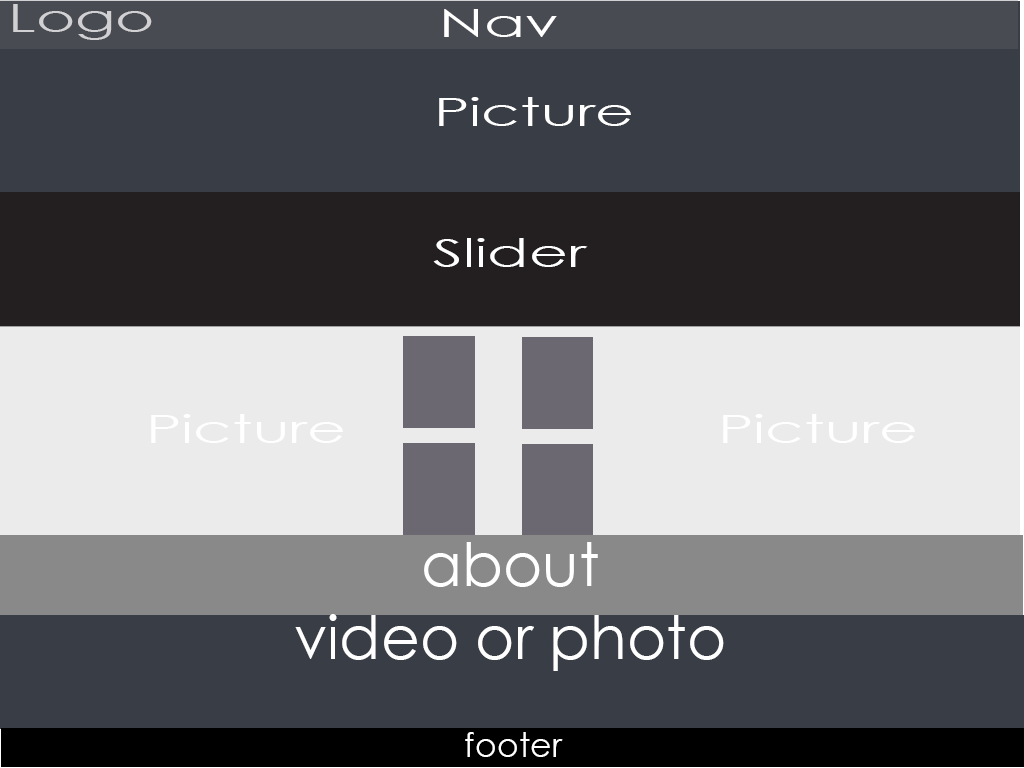
<style>
.page{position:relative;width:1024px;height:768px;background:#393e46}
.page>*{position:absolute;margin:0}
.t1{font:39.4px "CenturyGothic";color:#d1d0d3;scale:1.52 1}
.t2{font:39.4px "CenturyGothic";color:#ffffff;scale:1.52 1}
.t3{font:60px "CenturyGothic";color:#ffffff}
.t4{font:33.5px "CenturyGothic";color:#ffffff}
</style>
<div class="page">
<p class="t1" style="left:13px;top:4px;width:139px;height:36px">Logo</p>
<p class="t2" style="left:444px;top:9px;width:113px;height:28px">Nav</p>
<p class="t2" style="left:439px;top:97px;width:192px;height:29px">Picture</p>
<p class="t2" style="left:433px;top:238px;width:155px;height:29px">Slider</p>
<p class="t2" style="left:151px;top:414px;width:192px;height:29px">Picture</p>
<p class="t2" style="left:723px;top:414px;width:192px;height:29px">Picture</p>
<p class="t3" style="left:424px;top:542px;width:174px;height:45px">about</p>
<p class="t3" style="left:295px;top:614px;width:429px;height:57px">video or photo</p>
<p class="t4" style="left:465px;top:732px;width:98px;height:25px">footer</p>
</div>
